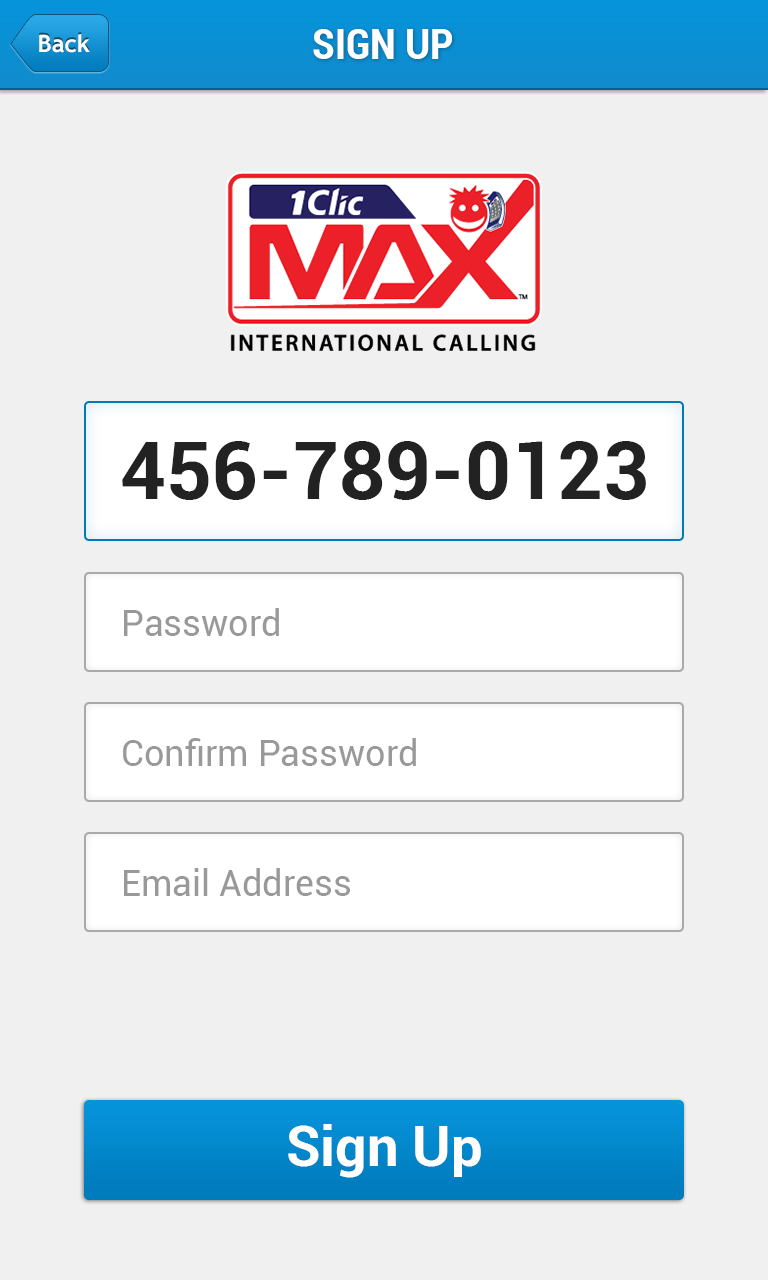
<style>
.page{position:relative;width:768px;height:1280px;background:#f0f0f0}
.page>*{position:absolute;margin:0}
.t1{font:42px "Roboto-BoldCondensed";color:#ffffff}
.t2{font:24px "TrebuchetMS-Bold";color:#ffffff}
.t3{font:80px "Roboto-Bold";color:#222222}
.t4{font:36px "Roboto-Regular";color:#999999}
.t5{font:56px "Roboto-Bold";color:#ffffff}
</style>
<div class="page">
<p class="t1" style="left:313px;top:29px;width:139px;height:30px">SIGN UP</p>
<p class="t2" style="left:39px;top:34px;width:51px;height:19px">Back</p>
<p class="t3" style="left:122px;top:441px;width:524px;height:59px">456-789-0123</p>
<p class="t4" style="left:124px;top:608px;width:155px;height:28px">Password</p>
<p class="t4" style="left:123px;top:738px;width:293px;height:28px">Confirm Password</p>
<p class="t4" style="left:124px;top:868px;width:226px;height:28px">Email Address</p>
<p class="t5" style="left:288px;top:1124px;width:193px;height:54px">Sign Up</p>
</div>
